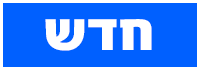
<style>
.page{position:relative;width:200px;height:70px;background:#0060ff}
.page>*{position:absolute;margin:0}
.t1{font:63.9px "FbAlbatros-Black";color:#ffffff}
</style>
<div class="page">
<p class="t1" style="left:45px;top:19px;width:107px;height:32px">חדש</p>
</div>
